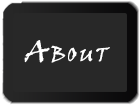
<style>
.page{position:relative;width:140px;height:105px;background:#282828}
.page>*{position:absolute;margin:0}
.t1{font:48px "VinerHandITC";letter-spacing:0.1em;color:#ffffff;font-variant:small-caps}
</style>
<div class="page">
<p class="t1" style="left:24px;top:40px;width:86px;height:23px">About</p>
</div>
